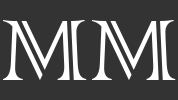
<style>
.page{position:relative;width:178px;height:100px;background:#333333}
.page>*{position:absolute;margin:0}
.t1{font:115px "ColonnaMT";color:#ffffff}
</style>
<div class="page">
<p class="t1" style="left:3px;top:20px;width:173px;height:60px">MM</p>
</div>
